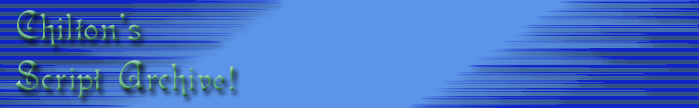
<style>
.page{position:relative;width:699px;height:108px;background:#5b94e9}
.page>*{position:absolute;margin:0}
.t1{font:42px "Isabella"}
</style>
<div class="page">
<p class="t1" style="left:15px;top:10px;width:219px;height:88px">Chilton’s<br>Script Archive!</p>
</div>
